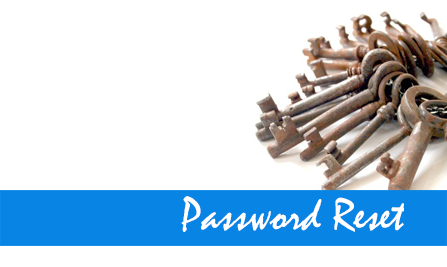
<style>
.page{position:relative;width:447px;height:267px;background:#ffffff}
.page>*{position:absolute;margin:0}
.t1{font:46.5px "Mistral";color:#ffffff}
</style>
<div class="page">
<p class="t1" style="left:181px;top:196px;width:223px;height:36px">Password Reset</p>
</div>
